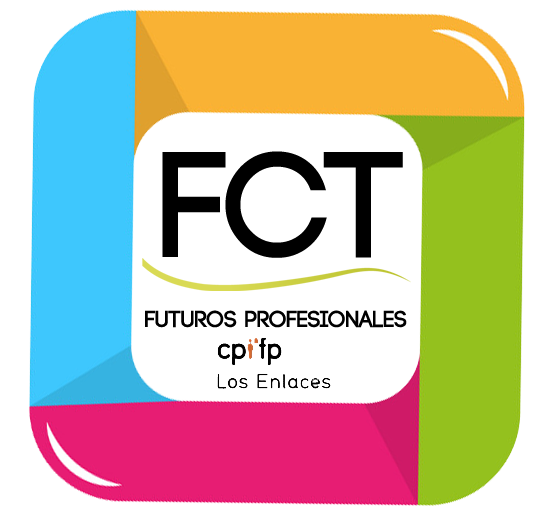
<style>
.page{position:relative;width:554px;height:517px;background:#ffffff}
.page>*{position:absolute;margin:0}
.t1{font:150px "Code-Bold";color:#000000}
.t2{font:23px "Code-Bold";color:#000000}
</style>
<div class="page">
<p class="t1" style="left:162px;top:151px;width:241px;height:107px">FCT</p>
<p class="t2" style="left:145px;top:310px;width:262px;height:18px">FUTUROs PROFESIONALes</p>
</div>
